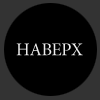
<style>
.page{position:relative;width:100px;height:100px;background:#000000}
.page>*{position:absolute;margin:0}
.t1{font:18px "MinionPro-Regular";letter-spacing:-0.025em;color:#ededed}
</style>
<div class="page">
<p class="t1" style="left:16px;top:43px;width:67px;height:13px">НАВЕРХ</p>
</div>
